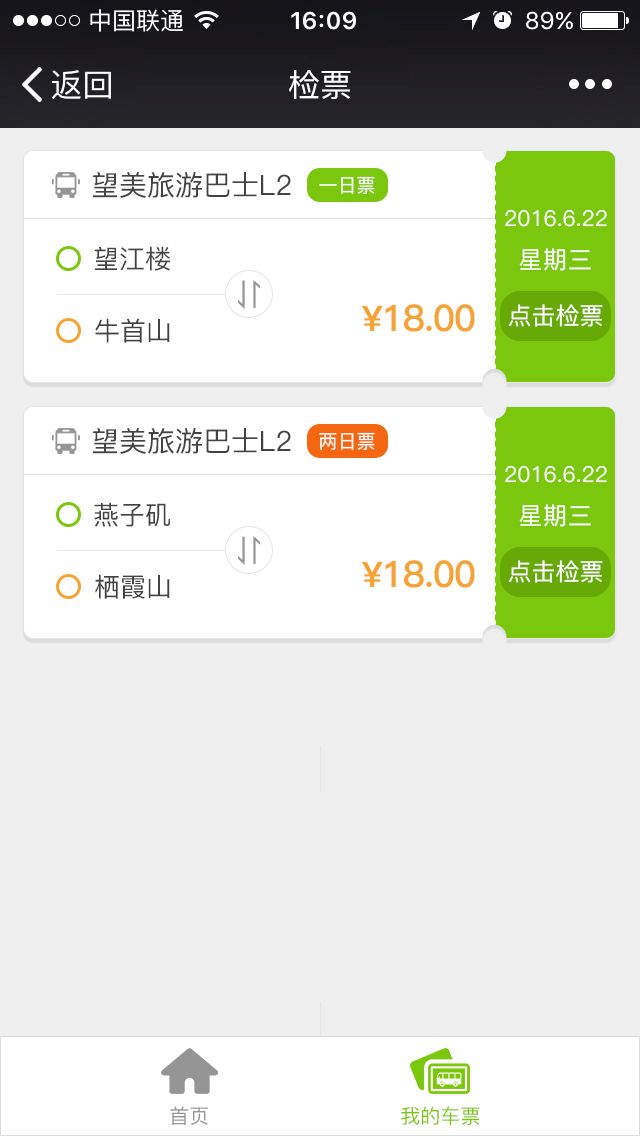
<style>
.page{position:relative;width:640px;height:1136px;background:#efefef}
.page>*{position:absolute;margin:0}
.t1{font:32px "PingFang-SC-Medium";color:#ffffff}
.t2{font:28px "PingFang-SC-Medium";color:#434343}
.t3{font:19.1px "PingFang-SC-Medium";color:#ffffff}
.t4{font:22px "PingFang-SC-Medium";color:#fffefe}
.t5{font:26px "PingFang-SC-Medium";color:#434343}
.t6{font:24px "PingFang-SC-Medium";letter-spacing:0.05em;color:#fffefe}
.t7{font:36.6px "PingFang-SC-Bold";letter-spacing:-0.025em;color:#f5a335}
.t8{font:35px "PingFang-SC-Bold";letter-spacing:-0.025em;color:#f5a335}
.t9{font:24px "PingFang-SC-Medium";color:#ffffff}
.t10{font:20.1px "PingFang-SC-Medium";color:#959595}
.t11{font:20.1px "PingFang-SC-Medium";color:#7bc70d}
</style>
<div class="page">
<p class="t1" style="left:289px;top:70px;width:62px;height:29px">检票</p>
<p class="t2" style="left:93px;top:172px;width:198px;height:26px">望美旅游巴士L2</p>
<p class="t3" style="left:319px;top:176px;width:56px;height:18px">一日票</p>
<p class="t4" style="left:505px;top:209px;width:102px;height:18px">2016.6.22</p>
<p class="t5" style="left:94px;top:246px;width:76px;height:25px">望江楼</p>
<p class="t6" style="left:519px;top:248px;width:72px;height:23px">星期三</p>
<p class="t7" style="left:362px;top:304px;width:113px;height:28px"><span class="t8">¥</span>18.00</p>
<p class="t9" style="left:508px;top:304px;width:95px;height:23px">点击检票</p>
<p class="t5" style="left:95px;top:318px;width:75px;height:25px">牛首山</p>
<p class="t2" style="left:93px;top:428px;width:198px;height:26px">望美旅游巴士L2</p>
<p class="t3" style="left:319px;top:432px;width:56px;height:18px">两日票</p>
<p class="t4" style="left:505px;top:465px;width:102px;height:18px">2016.6.22</p>
<p class="t5" style="left:94px;top:502px;width:76px;height:25px">燕子矶</p>
<p class="t6" style="left:519px;top:504px;width:72px;height:23px">星期三</p>
<p class="t7" style="left:362px;top:560px;width:113px;height:28px"><span class="t8">¥</span>18.00</p>
<p class="t9" style="left:508px;top:560px;width:95px;height:23px">点击检票</p>
<p class="t5" style="left:95px;top:574px;width:75px;height:25px">栖霞山</p>
<p class="t10" style="left:170px;top:1106px;width:38px;height:19px">首页</p>
<p class="t11" style="left:401px;top:1106px;width:79px;height:20px">我的车票</p>
</div>
